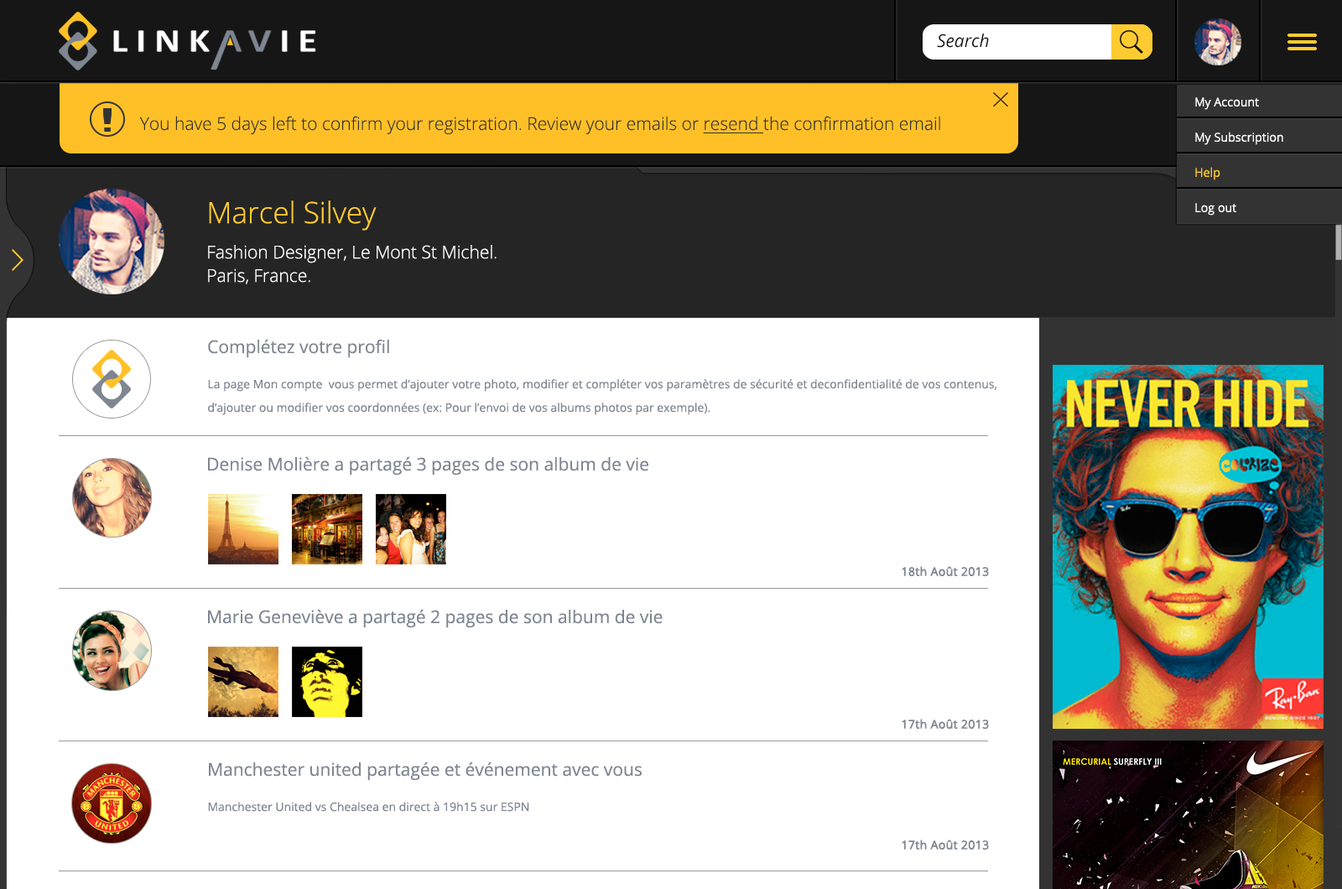
<style>
.page{position:relative;width:1342px;height:889px;background:#ffffff}
.page>*{position:absolute;margin:0}
.t1{font:17.6px "OpenSans-Italic";color:#121212}
.t2{font:11.7px/35.2px "OpenSans-Light";color:#fefefe;font-weight:bold}
.t3{font:11.7px/35.2px "OpenSans-Light";color:#ffcb30;font-weight:bold}
.t4{font:17.6px "OpenSans-Light";color:#333333}
.t5{font:17.6px "OpenSans-Light";color:#333333;text-decoration:underline}
.t6{font:17.6px/23.5px "OpenSans-Light";color:#ffffff}
.t7{font:29.3px/23.5px "OpenSans-Light";color:#ffcb30}
.t8{font:17.6px/35.2px "OpenSans-Light";color:#ffffff}
.t9{font:17.6px "OpenSans";color:#7f8692}
.t10{font:11.7px/23.5px "OpenSans";color:#7f8692}
.t11{font:11.7px "OpenSans";color:#7f8692;font-weight:bold}
.t12{font:11.7px "OpenSans";color:#7f8692}
</style>
<div class="page">
<p class="t1" style="left:937px;top:34px;width:52px;height:14px">Search</p>
<p class="t2" style="left:1195px;top:97px;width:88px;height:118px">My Account<br>My Subscription<br><span class="t3">Help</span><br>Log out</p>
<p class="t4" style="left:139px;top:116px;width:801px;height:18px">You have 5 days left to confirm your registration. Review your emails or <span class="t5">resend </span>the confirmation email</p>
<p class="t6" style="left:208px;top:200px;width:288px;height:84px"><span class="t7">Marcel Silvey<br></span><span class="t8">Fashio</span>n Designer, Le Mont St Michel.<br>Paris, France.</p>
<p class="t9" style="left:208px;top:339px;width:181px;height:19px">Complétez votre profil</p>
<p class="t10" style="left:208px;top:379px;width:789px;height:36px">La page Mon compte  vous permet d’ajouter votre photo, modifier et compléter vos paramètres de sécurité et deconfidentialité de vos contenus,<br>d’ajouter ou modifier vos coordonnées (ex: Pour l’envoi de vos albums photos par exemple).</p>
<p class="t9" style="left:208px;top:456px;width:440px;height:19px">Denise Molière a partagé 3 pages de son album de vie</p>
<p class="t11" style="left:901px;top:566px;width:88px;height:10px">18th Août 2013</p>
<p class="t9" style="left:208px;top:609px;width:454px;height:19px">Marie Geneviève a partagé 2 pages de son album de vie</p>
<p class="t11" style="left:901px;top:719px;width:88px;height:10px">17th Août 2013</p>
<p class="t9" style="left:209px;top:761px;width:432px;height:20px">Manchester united partagée et événement avec vous</p>
<p class="t12" style="left:208px;top:802px;width:321px;height:10px">Manchester United vs Chealsea en direct à 19h15 sur ESPN</p>
<p class="t11" style="left:901px;top:839px;width:88px;height:10px">17th Août 2013</p>
</div>
